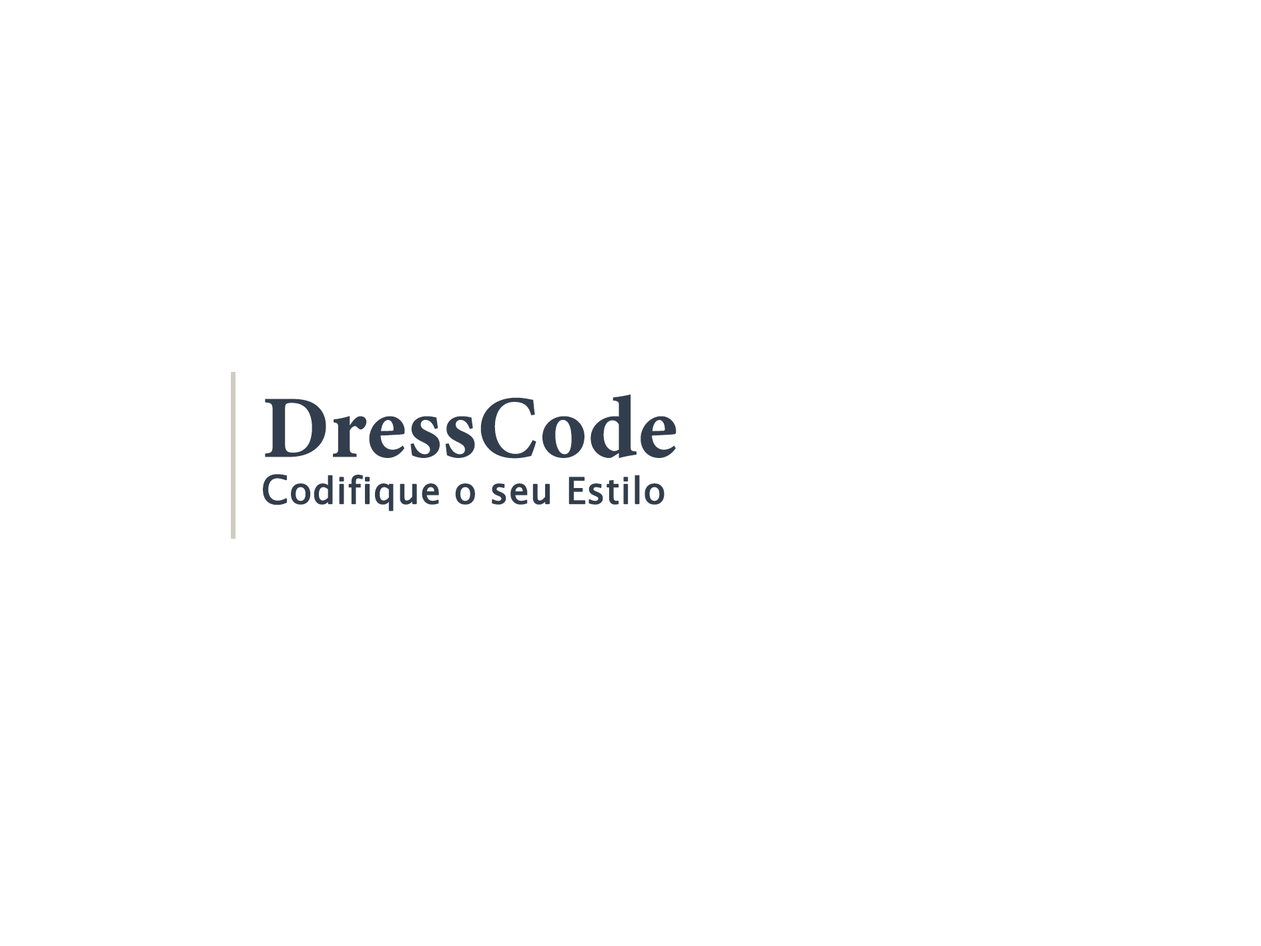
<style>
.page{position:relative;width:1261px;height:946px;background:#ffffff}
.page>*{position:absolute;margin:0}
.t1{font:36.1px "LucidaSansUnicode";color:#323e4d;font-weight:bold}
.t2{font:89px "MinionConceptRoman-Bold";color:#323e4d;font-weight:bold}
.t3{font:38.9px "LucidaSansUnicode";color:#323e4d;font-weight:bold}
</style>
<div class="page">
<p class="t1" style="left:263px;top:394px;width:414px;height:117px"><span class="t2">DressCode<br></span><span class="t3">C</span>odifique o seu Estilo</p>
</div>
